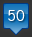
<style>
.page{position:relative;width:32px;height:37px}
.page>*{position:absolute;margin:0}
.t1{font:14px "NewsGothicMT";color:#ffffff}
</style>
<div class="page">
<p class="t1" style="left:8px;top:10px;width:17px;height:11px">50</p>
</div>
